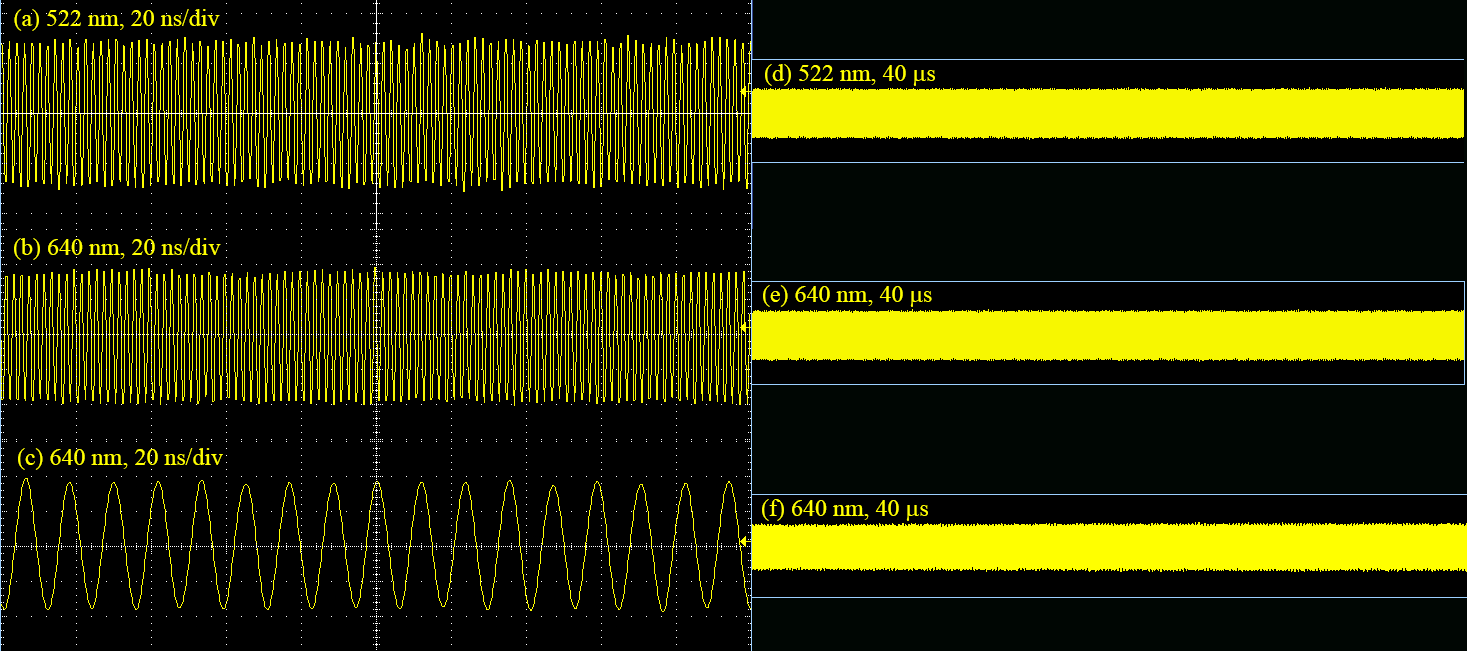
<style>
.page{position:relative;width:1467px;height:651px;background:#000000}
.page>*{position:absolute;margin:0}
.t1{font:24px "TimesNewRomanPSMT";color:#ffff00}
.t2{font:24px "SymbolMT";color:#ffff00}
</style>
<div class="page">
<p class="t1" style="left:14px;top:9px;width:206px;height:22px">(a) 522 nm, 20 ns/div</p>
<p class="t1" style="left:765px;top:64px;width:170px;height:22px">(d) 522 nm, 40 <span class="t2">m</span>s</p>
<p class="t1" style="left:14px;top:238px;width:207px;height:22px">(b) 640 nm, 20 ns/div</p>
<p class="t1" style="left:763px;top:285px;width:169px;height:22px">(e) 640 nm, 40 <span class="t2">m</span>s</p>
<p class="t1" style="left:18px;top:448px;width:205px;height:22px">(c) 640 nm, 20 ns/div</p>
<p class="t1" style="left:762px;top:499px;width:166px;height:22px">(f) 640 nm, 40 <span class="t2">m</span>s</p>
</div>
